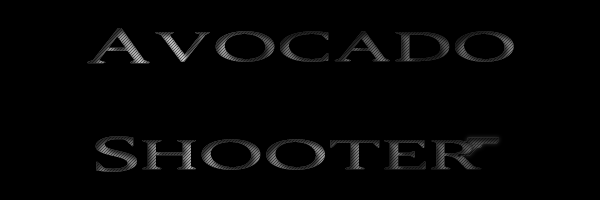
<style>
.page{position:relative;width:600px;height:200px;background:#000000}
.page>*{position:absolute;margin:0}
.t1{font:90px "007GoldenEye-Regular";font-weight:bold}
</style>
<div class="page">
<p class="t1" style="left:87px;top:28px;width:427px;height:144px;text-align:center">Avocado<br>Shooter</p>
</div>
